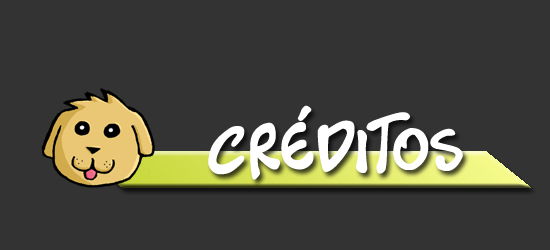
<style>
.page{position:relative;width:550px;height:250px;background:#333333}
.page>*{position:absolute;margin:0}
.t1{font:60px "Timotheos";color:#ffffff}
</style>
<div class="page">
<p class="t1" style="left:208px;top:105px;width:255px;height:75px">Créditos</p>
</div>
